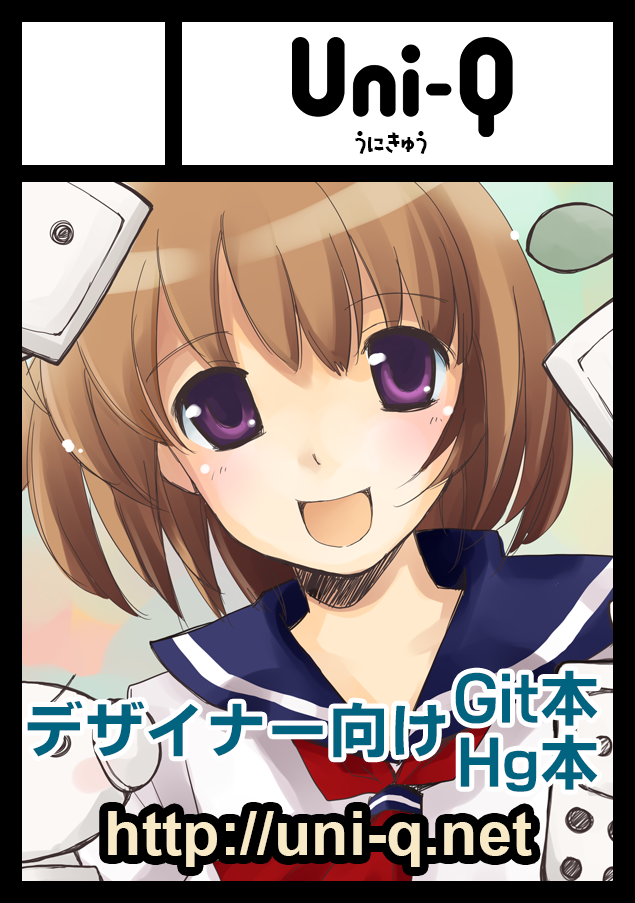
<style>
.page{position:relative;width:635px;height:903px}
.page>*{position:absolute;margin:0}
.t1{font:28.1px "NatsumikanHIR";color:#000000}
.t2{font:61.1px "SbIsarago-B";color:#006380}
.t3{font:61.1px "Arial-BoldMT";color:#f8eac7}
</style>
<div class="page">
<p class="t1" style="left:355px;top:131px;width:72px;height:23px">4ig(4</p>
<p class="t2" style="left:455px;top:670px;width:143px;height:56px">Git本</p>
<p class="t2" style="left:27px;top:701px;width:419px;height:57px">デザイナー向け</p>
<p class="t2" style="left:460px;top:734px;width:138px;height:58px">Hg本</p>
<p class="t3" style="left:108px;top:811px;width:424px;height:56px">http://uni-q.net</p>
</div>
